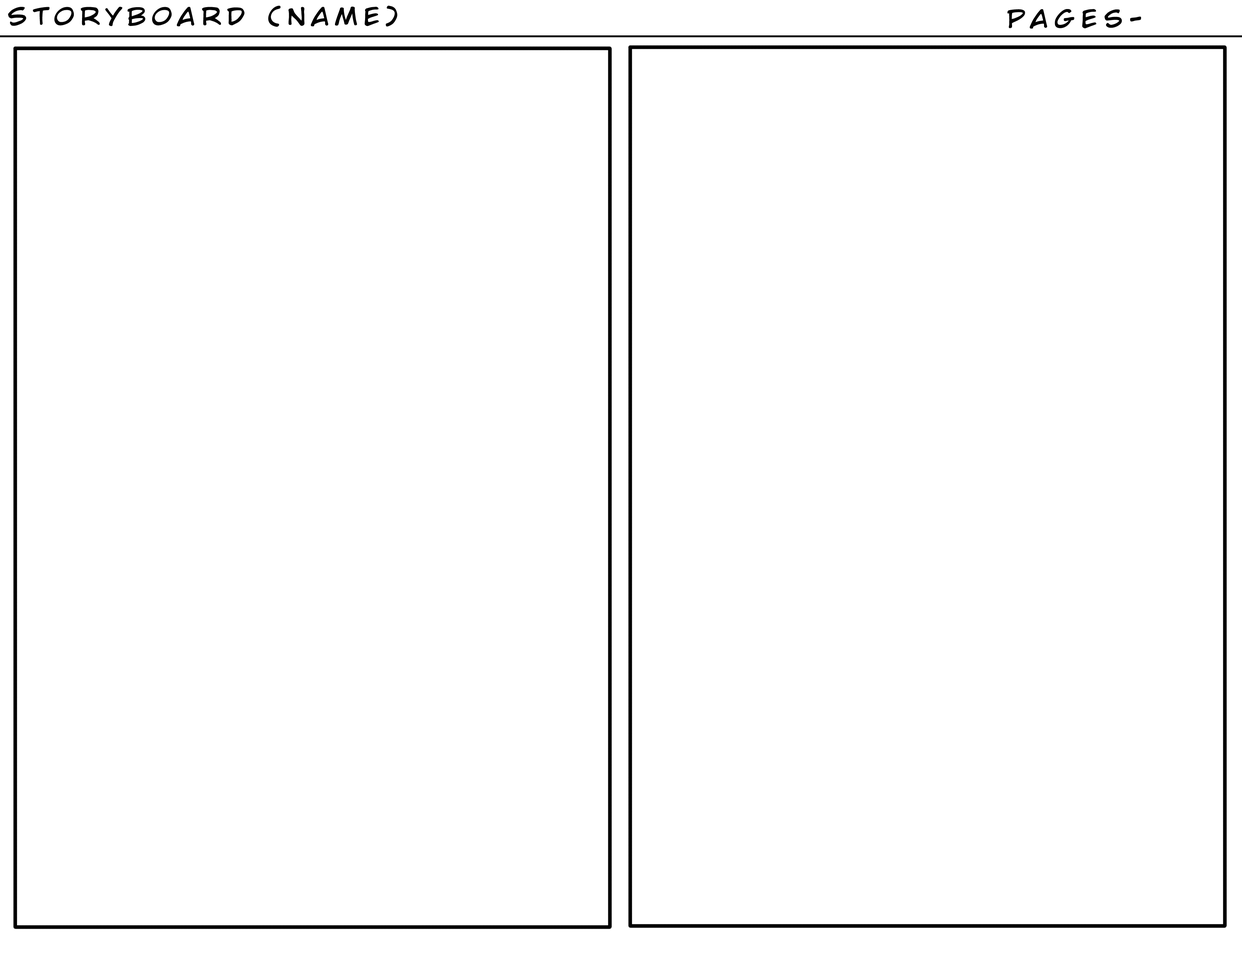
<style>
.page{position:relative;width:1242px;height:960px;background:#ffffff}
.page>*{position:absolute;margin:0}
.t1{font:23.4px "WildWordsRoman";letter-spacing:0.22em;color:#010101;scale:1.17 1}
</style>
<div class="page">
<p class="t1" style="left:8px;top:6px;width:390px;height:21px">Storyboard (name)</p>
<p class="t1" style="left:1007px;top:9px;width:134px;height:20px">Pages-</p>
</div>
